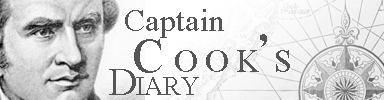
<style>
.page{position:relative;width:384px;height:100px}
.page>*{position:absolute;margin:0}
.t1{font:32.4px "Myanmar3";color:#555555}
.t2{font:47.6px "Myanmar3";letter-spacing:0.21em;color:#555555;font-variant:small-caps}
.t3{font:47.6px "Myanmar3";color:#555555;font-variant:small-caps}
.t4{font:38.8px "Myanmar3";letter-spacing:-0.03em;color:#555555;font-variant:small-caps}
</style>
<div class="page">
<p class="t1" style="left:125px;top:9px;width:99px;height:29px">Captain</p>
<p class="t2" style="left:134px;top:34px;width:156px;height:39px">Coo<span class="t3">k’s</span></p>
<p class="t4" style="left:109px;top:69px;width:90px;height:26px">Diary</p>
</div>
